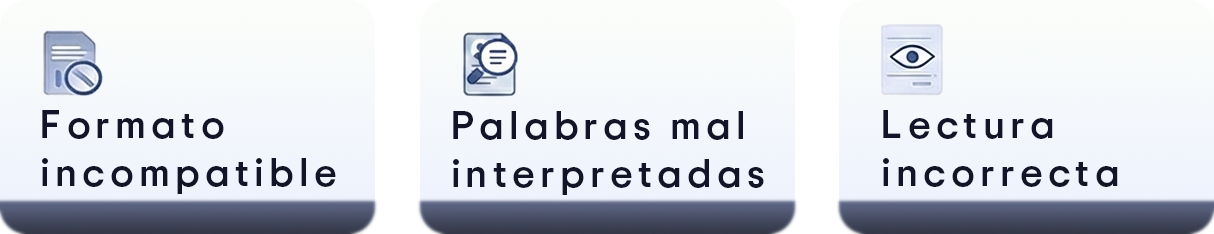
<style>
.page{position:relative;width:1214px;height:234px}
.page>*{position:absolute;margin:0}
.t1{font:39.6px "TripSans-Medium";letter-spacing:0.13em;color:#131427}
</style>
<div class="page">
<p class="t1" style="left:42px;top:110px;width:294px;height:84px">Formato<br>incompatible</p>
<p class="t1" style="left:453px;top:111px;width:311px;height:84px">Palabras mal<br>interpretadas</p>
<p class="t1" style="left:883px;top:110px;width:235px;height:77px">Lectura<br>incorrecta</p>
</div>
